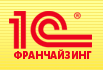
<style>
.page{position:relative;width:103px;height:70px;background:#f9ea69}
.page>*{position:absolute;margin:0}
.t1{font:10.7px "FuturisC-Bold";letter-spacing:0.02em;color:#eb041e;text-transform:uppercase;scale:0.9 1}
</style>
<div class="page">
<p class="t1" style="left:14px;top:49px;width:78px;height:10px">ФРАНЧАЙЗИНГ</p>
</div>
